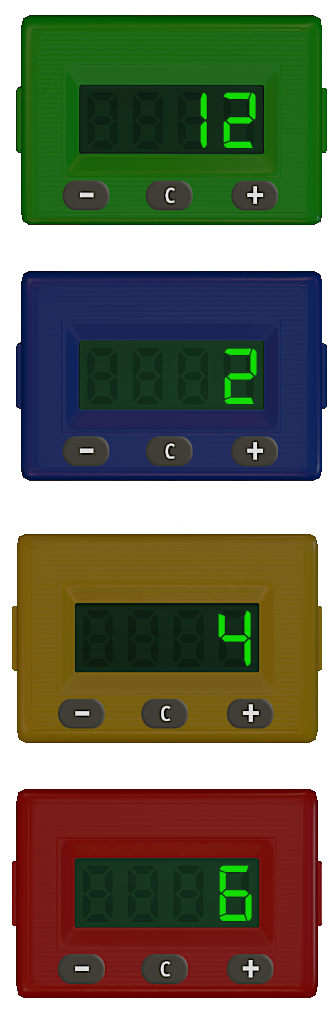
<style>
.page{position:relative;width:335px;height:1026px;background:#ffffff}
.page>*{position:absolute;margin:0}
.t1{font:84.5px "Digital-7";letter-spacing:0.12em;color:#12dc01}
</style>
<div class="page">
<p class="t1" style="left:200px;top:92px;width:56px;height:56px">12</p>
<p class="t1" style="left:224px;top:348px;width:33px;height:56px">2</p>
<p class="t1" style="left:218px;top:610px;width:33px;height:56px">4</p>
<p class="t1" style="left:219px;top:865px;width:33px;height:56px">6</p>
</div>
